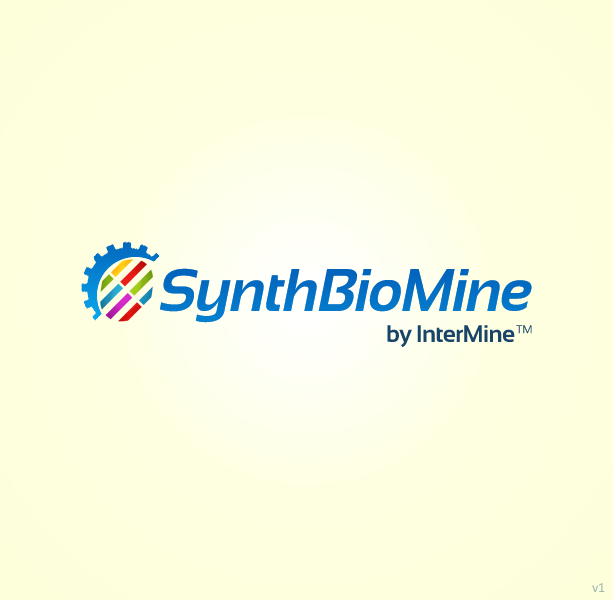
<style>
.page{position:relative;width:613px;height:600px;background:#fdffdd}
.page>*{position:absolute;margin:0}
.t1{font:60px "Sansation-Bold-Italic";letter-spacing:-0.025em;color:#0370c4}
.t2{font:24px "Sansation-Bold";letter-spacing:-0.025em;color:#184568}
.t3{font:14px "Calibri";letter-spacing:-0.025em;color:#a1b5ad}
</style>
<div class="page">
<p class="t1" style="left:160px;top:268px;width:372px;height:55px">SynthBioMine</p>
<p class="t1" style="left:160px;top:268px;width:372px;height:55px">SynthBioMine</p>
<p class="t2" style="left:387px;top:325px;width:145px;height:22px">by InterMine™</p>
<p class="t3" style="left:592px;top:583px;width:13px;height:9px">v1</p>
</div>
